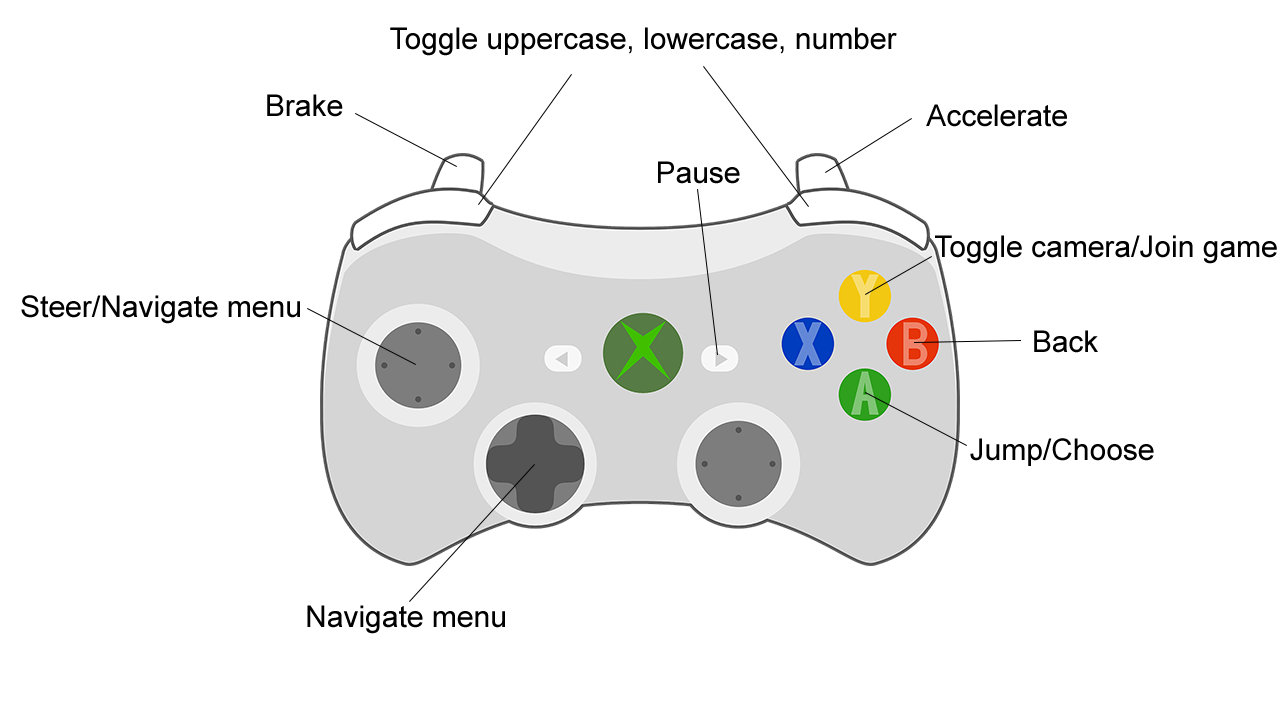
<style>
.page{position:relative;width:1280px;height:720px;background:#ffffff}
.page>*{position:absolute;margin:0}
.t1{font:30px "ArialMT";color:#000000}
</style>
<div class="page">
<p class="t1" style="left:390px;top:27px;width:507px;height:29px">Toggle uppercase, lowercase, number</p>
<p class="t1" style="left:267px;top:94px;width:76px;height:23px">Brake</p>
<p class="t1" style="left:926px;top:104px;width:141px;height:23px">Accelerate</p>
<p class="t1" style="left:658px;top:161px;width:82px;height:23px">Pause</p>
<p class="t1" style="left:935px;top:235px;width:342px;height:29px">Toggle camera/Join game</p>
<p class="t1" style="left:21px;top:295px;width:279px;height:29px">Steer/Navigate menu</p>
<p class="t1" style="left:1034px;top:330px;width:64px;height:23px">Back</p>
<p class="t1" style="left:970px;top:438px;width:184px;height:28px">Jump/Choose</p>
<p class="t1" style="left:307px;top:605px;width:198px;height:29px">Navigate menu</p>
</div>
